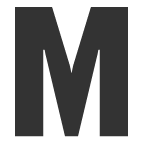
<style>
.page{position:relative;width:144px;height:144px;background:#333333}
.page>*{position:absolute;margin:0}
.t1{font:175.4px "LeagueGothic-Regular";letter-spacing:0.08em;color:#333333;scale:1.59 1}
</style>
<div class="page">
<p class="t1" style="left:15px;top:7px;width:113px;height:130px">M</p>
</div>
